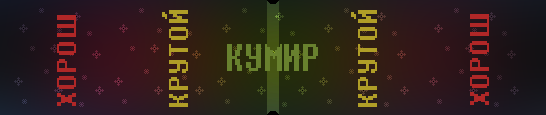
<style>
.page{position:relative;width:546px;height:115px}
.page>*{position:absolute;margin:0}
.t1{font:33.6px "DeterminationMonoRUSBYLYAJK";color:#b02727}
.t2{font:33.6px "DeterminationMonoRUSBYLYAJK";color:#b09e27}
.t3{font:48px "DeterminationMonoRUSBYLYAJK";color:#68812e;scale:0.79 1}
</style>
<div class="page">
<p class="t1" style="left:57px;top:15px;width:19px;height:91px;rotate:-90deg">ХОРОШ</p>
<p class="t2" style="left:162px;top:10px;width:26px;height:97px;rotate:-90deg">КРУТОЙ</p>
<p class="t2" style="left:351px;top:10px;width:26px;height:97px;rotate:-90deg">КРУТОЙ</p>
<p class="t1" style="left:470px;top:14px;width:19px;height:91px;rotate:-90deg">ХОРОШ</p>
<p class="t3" style="left:227px;top:44px;width:91px;height:27px">КУМИР</p>
</div>
